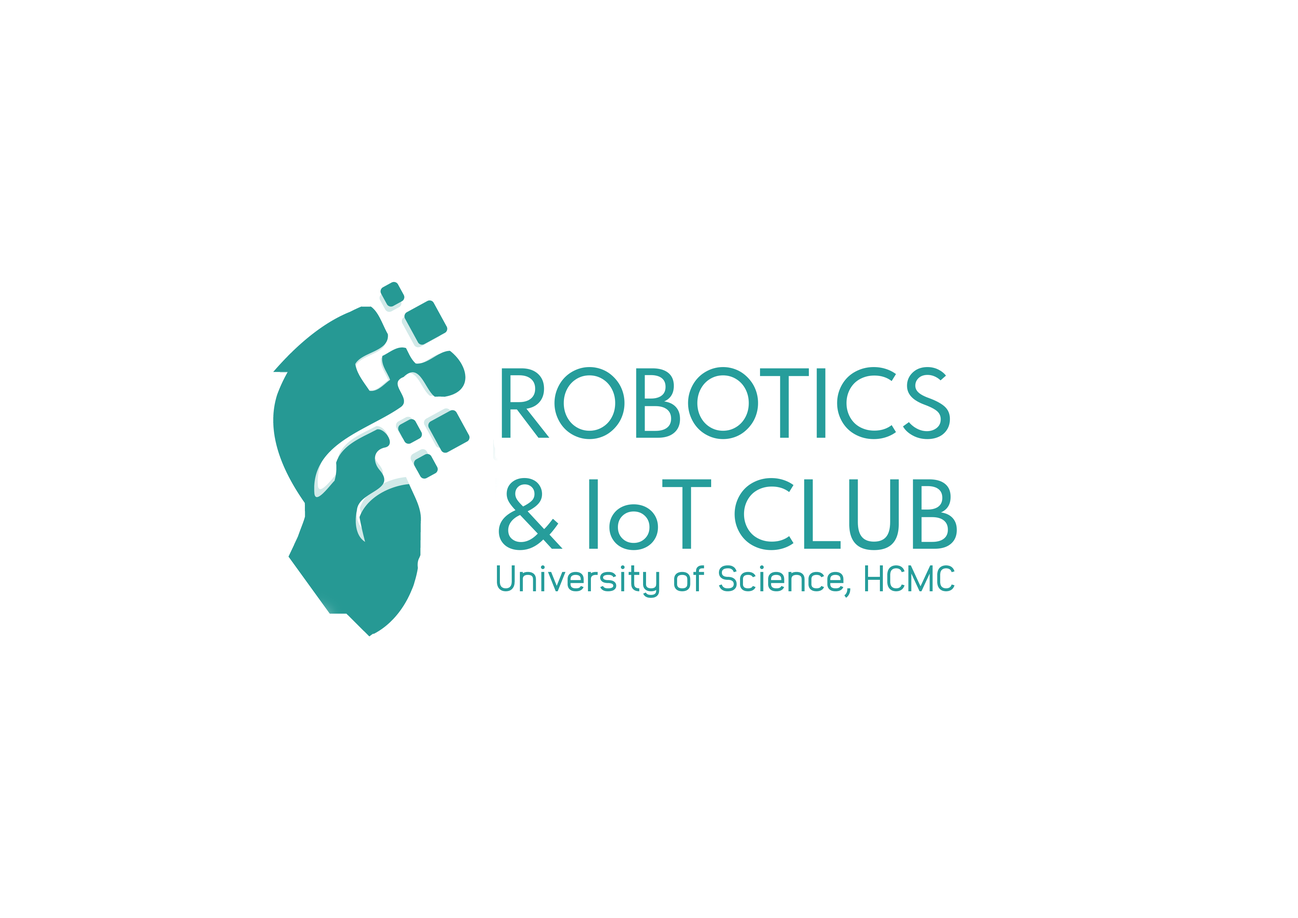
<style>
.page{position:relative;width:1298px;height:918px;background:#ffffff}
.page>*{position:absolute;margin:0}
.t1{font:92.5px "SpartanMB-Medium";color:#269d9b}
.t2{font:37px "Anodina-Regular";color:#269d9b}
</style>
<div class="page">
<p class="t1" style="left:499px;top:367px;width:458px;height:183px">ROBOTICS <br>&amp; IoT CLUB</p>
<p class="t2" style="left:497px;top:566px;width:458px;height:32px">University of Science, HCMC</p>
</div>
